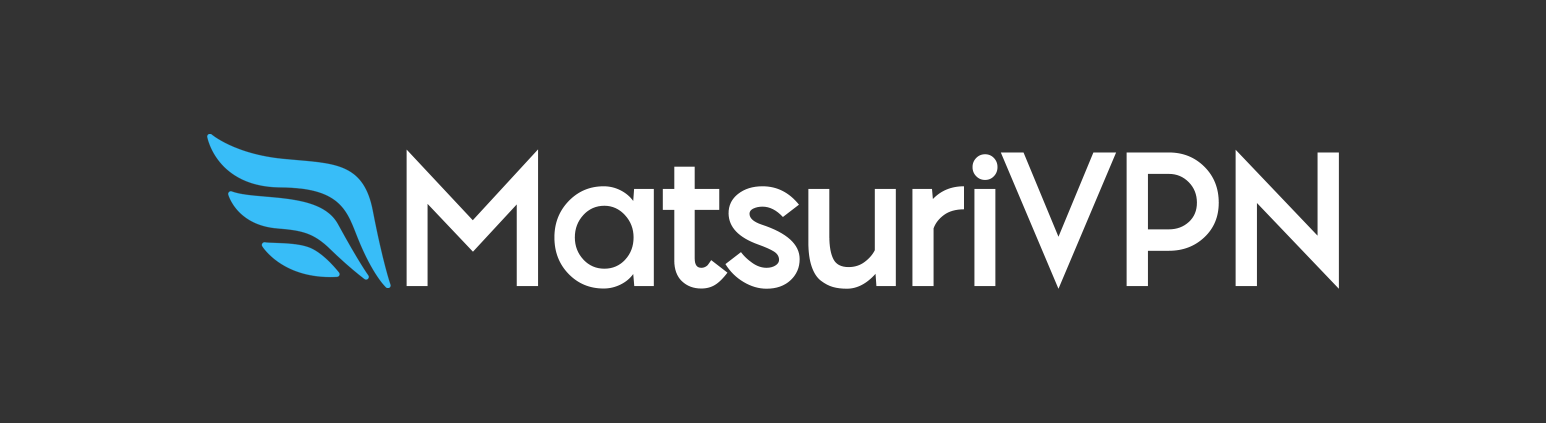
<style>
.page{position:relative;width:1546px;height:423px;background:#333333}
.page>*{position:absolute;margin:0}
.t1{font:177.6px "PontiacBold";letter-spacing:-0.035em;color:#ffffff}
</style>
<div class="page">
<p class="t1" style="left:406px;top:149px;width:933px;height:140px">MatsuriVPN</p>
</div>
